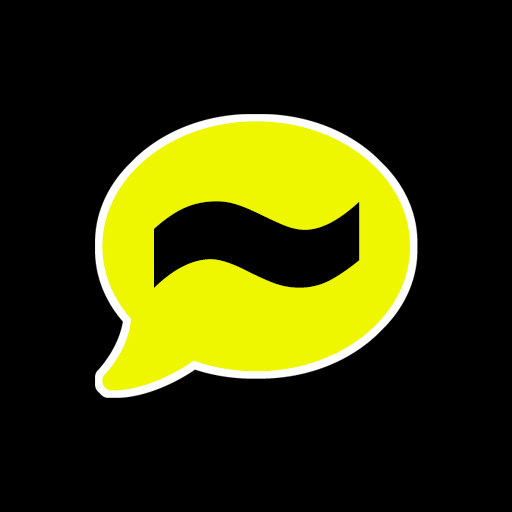
<style>
.page{position:relative;width:512px;height:512px;background:#000000}
.page>*{position:absolute;margin:0}
.t1{font:366.1px "Arial-Black";color:#000000}
</style>
<div class="page">
<p class="t1" style="left:154px;top:201px;width:206px;height:87px">~</p>
</div>
